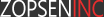
<style>
.page{position:relative;width:104px;height:17px;background:#333333}
.page>*{position:absolute;margin:0}
.t1{font:23.8px "Leelawadee";letter-spacing:-0.02em;color:#ffffff;scale:0.85 1}
.t2{font:23.8px "Leelawadee";letter-spacing:-0.02em;color:#e92d2d;scale:0.85 1}
</style>
<div class="page">
<p class="t1" style="left:0px;top:0px;width:103px;height:17px">ZOPSEN<span class="t2">INC</span></p>
</div>
